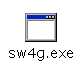
<style>
.page{position:relative;width:80px;height:80px;background:#ffffff}
.page>*{position:absolute;margin:0}
.t1{font:14px "MSReferenceSansSerif";color:#000000}
</style>
<div class="page">
<p class="t1" style="left:9px;top:48px;width:64px;height:13px">sw4g.exe</p>
</div>
